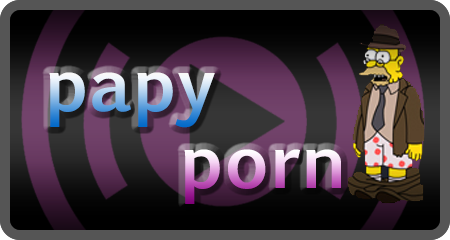
<style>
.page{position:relative;width:450px;height:240px}
.page>*{position:absolute;margin:0}
.t1{font:72px "EuphemiaUCAS-Bold"}
</style>
<div class="page">
<p class="t1" style="left:49px;top:72px;width:166px;height:56px">papy</p>
<p class="t1" style="left:184px;top:149px;width:157px;height:55px">porn</p>
</div>
